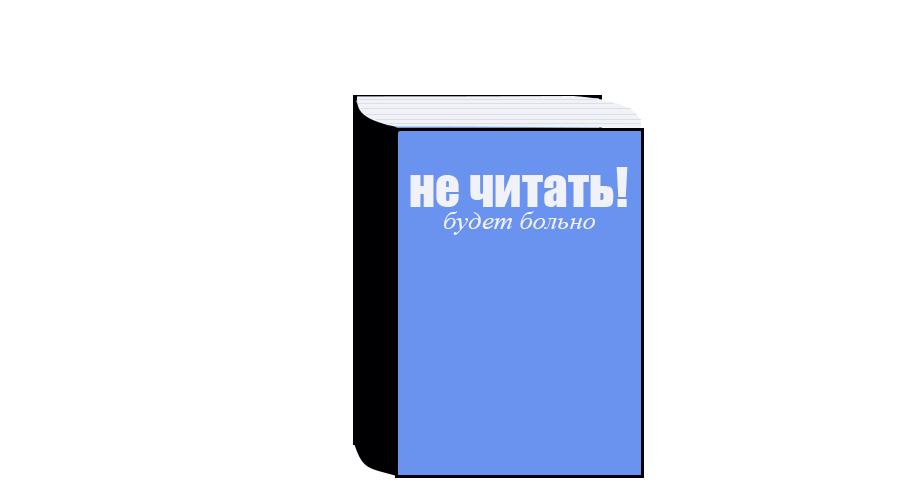
<style>
.page{position:relative;width:900px;height:500px;background:#ffffff}
.page>*{position:absolute;margin:0}
.t1{font:49.8px "Impact";color:#f0f2f7}
.t2{font:26.4px "TimesNewRomanPS-ItalicMT";color:#f0f2f7}
</style>
<div class="page">
<p class="t1" style="left:410px;top:167px;width:218px;height:40px">не читать!</p>
<p class="t2" style="left:443px;top:211px;width:153px;height:24px">будет больно</p>
</div>
